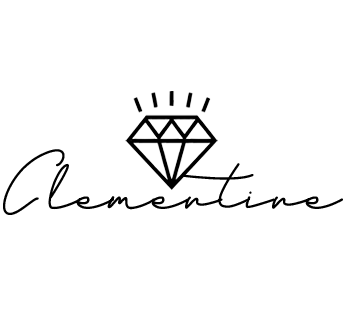
<style>
.page{position:relative;width:343px;height:328px;background:#ffffff}
.page>*{position:absolute;margin:0}
.t1{font:62.5px "ClassyBeautifulRegular";color:#000000}
</style>
<div class="page">
<p class="t1" style="left:3px;top:149px;width:340px;height:66px">Clementine</p>
</div>
